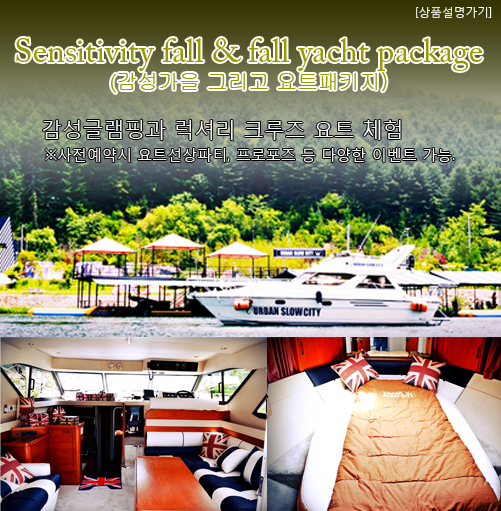
<style>
.page{position:relative;width:501px;height:511px}
.page>*{position:absolute;margin:0}
.t1{font:11.7px "MalgunGothicRegular";color:#f8f8f8}
.t2{font:33.3px/37.5px "ACaslonPro-Regular";color:#999900}
.t3{font:33.3px/24px "ACaslonPro-Regular";color:#999900}
.t4{font:20.8px/37.5px "ACaslonPro-Regular";color:#999900}
.t5{font:20.8px/37.5px "Gulim";color:#999900}
.t6{font:20.8px/24px "Gulim";color:#999900}
.t7{font:20.8px "MalgunGothicRegular";color:#f8f8f8}
.t8{font:15px "MalgunGothicRegular";color:#f8f8f8}
</style>
<div class="page">
<p class="t1" style="left:416px;top:6px;width:76px;height:12px">[상품설명가기]</p>
<p class="t2" style="left:16px;top:38px;width:467px;height:55px;text-align:center"><span class="t3">Sensitivity fa</span>ll &amp; fall yacht package<br><span class="t4">(</span><span class="t5">감성가을 그</span><span class="t6">리고 요트패키지)</span></p>
<p class="t7" style="left:42px;top:120px;width:359px;height:20px">감성글램핑과 럭셔리 크루즈 요트 체험</p>
<p class="t8" style="left:45px;top:148px;width:410px;height:15px">※사전예약시 요트선상파티, 프로포즈 등 다양한 이벤트 가능.</p>
</div>
